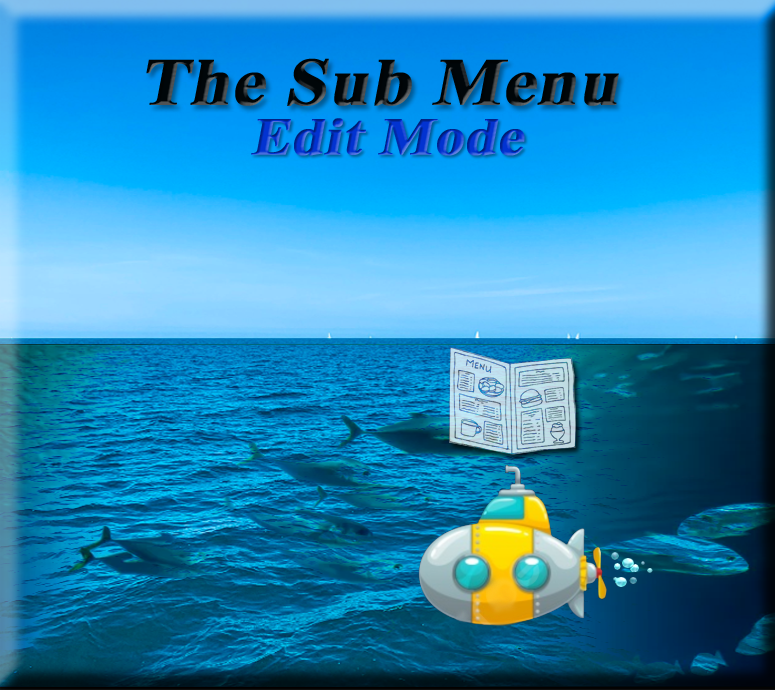
<style>
.page{position:relative;width:775px;height:690px}
.page>*{position:absolute;margin:0}
.t1{font:67px "TimesNewRomanPS-BoldMT";color:#000609;font-weight:bold;font-style:italic;scale:1.08 1}
.t2{font:53px "TimesNewRomanPS-BoldMT";font-weight:bold;font-style:italic;scale:1.08 1}
</style>
<div class="page">
<p class="t1" style="left:146px;top:58px;width:473px;height:48px">The Sub Menu</p>
<p class="t2" style="left:251px;top:118px;width:274px;height:38px">Edit Mode</p>
</div>
